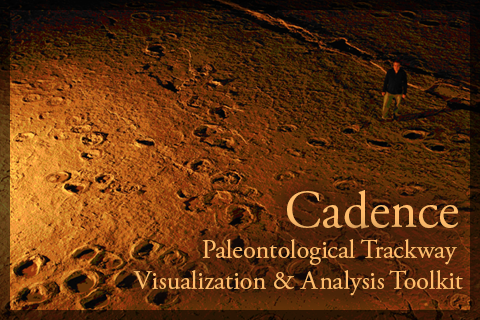
<style>
.page{position:relative;width:480px;height:320px}
.page>*{position:absolute;margin:0}
.t1{font:52.4px "AGaramondPro-Regular";color:#febb6b}
.t2{font:26.2px "AGaramondPro-Regular";color:#ffbc6b}
</style>
<div class="page">
<p class="t1" style="left:287px;top:190px;width:171px;height:39px">Cadence</p>
<p class="t2" style="left:133px;top:239px;width:330px;height:57px;text-align:right">Paleontological Trackway <br>Visualization &amp; Analysis Toolkit</p>
</div>
